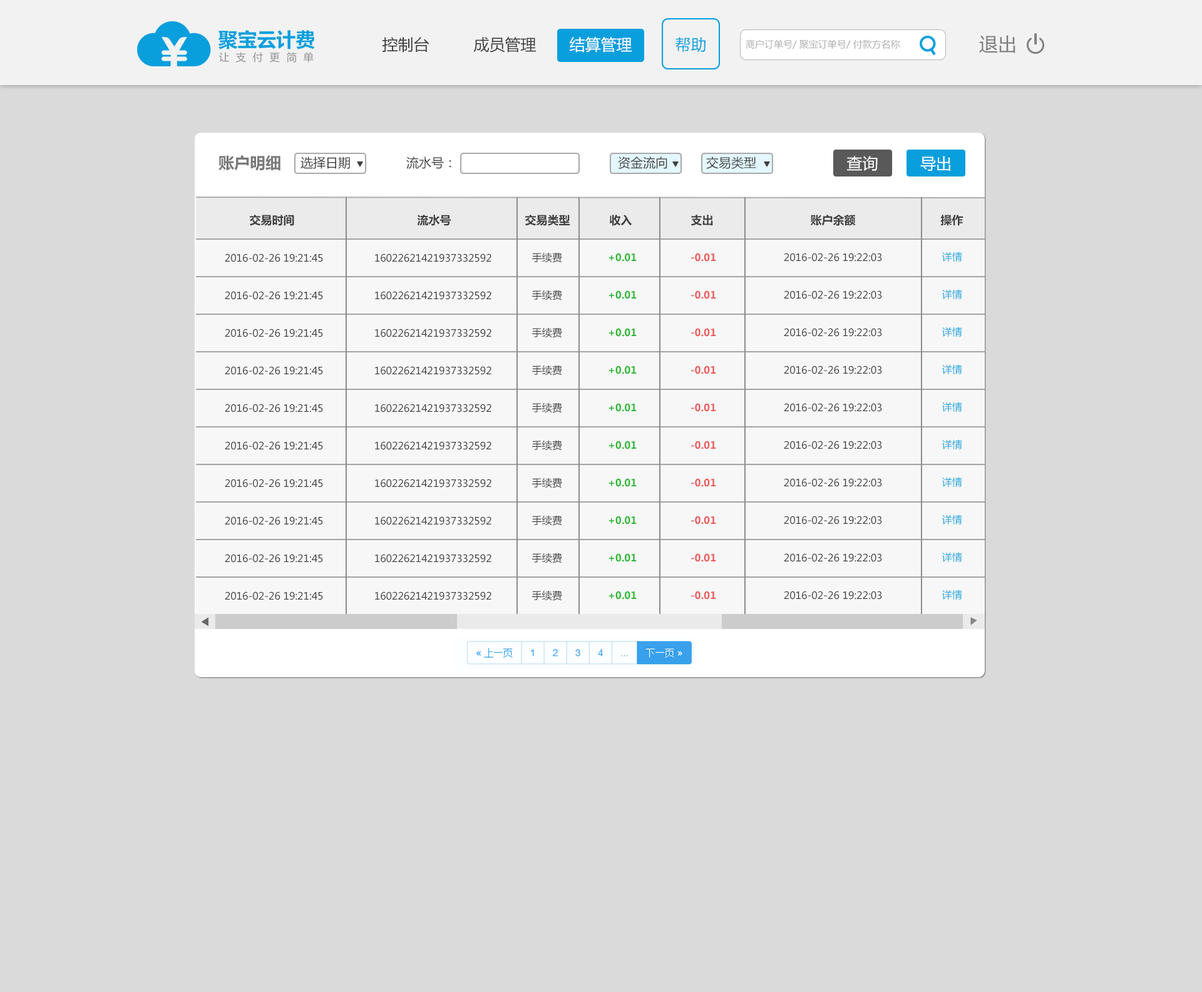
<style>
.page{position:relative;width:1202px;height:992px;background:#dadada}
.page>*{position:absolute;margin:0}
.t1{font:15.6px "MicrosoftYaHei";color:#3f3f3f}
.t2{font:15.6px "MicrosoftYaHei";color:#ffffff}
.t3{font:15.6px "MicrosoftYaHei";color:#099fdd}
.t4{font:9.4px "MicrosoftYaHei";color:#aeaeae}
.t5{font:18.8px "MicrosoftYaHei";color:#7d7d7d}
.t6{font:15.6px "MicrosoftYaHei-Bold";color:#797979}
.t7{font:12.5px "MicrosoftYaHei";color:#3f3f3f}
.t8{font:11.3px "MicrosoftYaHei-Bold";color:#3f3f3f}
.t9{font:10px "MicrosoftYaHei";color:#3f3f3f}
.t10{font:10px "MicrosoftYaHei-Bold";color:#30b837}
.t11{font:10px "MicrosoftYaHei-Bold";color:#eb5a5a}
.t12{font:10px "MicrosoftYaHei";color:#24a8de}
</style>
<div class="page">
<p class="t1" style="left:382px;top:37px;width:47px;height:16px">控制台</p>
<p class="t1" style="left:473px;top:37px;width:63px;height:16px">成员管理</p>
<p class="t2" style="left:569px;top:37px;width:63px;height:16px">结算管理</p>
<p class="t3" style="left:675px;top:37px;width:30px;height:15px">帮助</p>
<p class="t4" style="left:746px;top:39px;width:154px;height:10px">商户订单号/ 聚宝订单号/ 付款方名称</p>
<p class="t5" style="left:979px;top:35px;width:36px;height:18px">退出</p>
<p class="t6" style="left:218px;top:155px;width:62px;height:16px">账户明细</p>
<p class="t7" style="left:300px;top:156px;width:50px;height:13px">选择日期</p>
<p class="t7" style="left:406px;top:156px;width:45px;height:13px">流水号：</p>
<p class="t7" style="left:618px;top:156px;width:49px;height:13px">资金流向</p>
<p class="t7" style="left:706px;top:156px;width:50px;height:13px">交易类型</p>
<p class="t2" style="left:846px;top:156px;width:32px;height:15px">查询</p>
<p class="t2" style="left:920px;top:156px;width:30px;height:15px">导出</p>
<p class="t8" style="left:249px;top:215px;width:45px;height:11px">交易时间</p>
<p class="t8" style="left:417px;top:215px;width:34px;height:11px">流水号</p>
<p class="t8" style="left:525px;top:215px;width:45px;height:11px">交易类型</p>
<p class="t8" style="left:609px;top:215px;width:23px;height:11px">收入</p>
<p class="t8" style="left:690px;top:215px;width:23px;height:11px">支出</p>
<p class="t8" style="left:810px;top:215px;width:46px;height:11px">账户余额</p>
<p class="t8" style="left:940px;top:215px;width:23px;height:11px">操作</p>
<p class="t9" style="left:225px;top:254px;width:98px;height:8px">2016-02-26 19:21:45</p>
<p class="t9" style="left:375px;top:254px;width:116px;height:8px">16022621421937332592</p>
<p class="t9" style="left:532px;top:252px;width:30px;height:11px">手续费</p>
<p class="t10" style="left:608px;top:253px;width:29px;height:9px">+0.01</p>
<p class="t11" style="left:691px;top:253px;width:25px;height:9px">-0.01</p>
<p class="t9" style="left:784px;top:253px;width:98px;height:9px">2016-02-26 19:22:03</p>
<p class="t12" style="left:942px;top:252px;width:20px;height:10px">详情</p>
</div>
